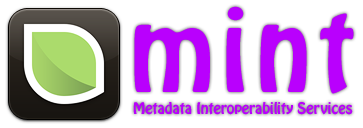
<style>
.page{position:relative;width:363px;height:128px;background:#ffffff}
.page>*{position:absolute;margin:0}
.t1{font:100px "HoboStd";letter-spacing:0.075em;color:#b900fd}
.t2{font:14px "HoboStd";color:#b900fd}
</style>
<div class="page">
<p class="t1" style="left:134px;top:6px;width:220px;height:88px">mint</p>
<p class="t2" style="left:133px;top:102px;width:220px;height:13px">Metadata Interoperability Services</p>
</div>
